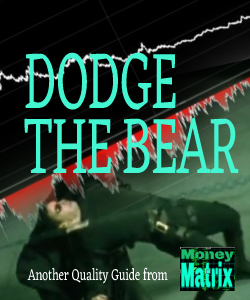
<style>
.page{position:relative;width:250px;height:300px}
.page>*{position:absolute;margin:0}
.t1{font:82.6px "Eczar-Regular";color:#44f5d2;scale:0.57 1}
.t2{font:16.4px "Eczar-Regular";color:#ffffff;scale:0.71 1}
</style>
<div class="page">
<p class="t1" style="left:25px;top:52px;width:151px;height:58px">DODGE</p>
<p class="t1" style="left:24px;top:118px;width:88px;height:55px">THE</p>
<p class="t1" style="left:123px;top:117px;width:116px;height:56px">BEAR</p>
<p class="t2" style="left:27px;top:267px;width:141px;height:17px">Another Quality Guide from</p>
</div>
